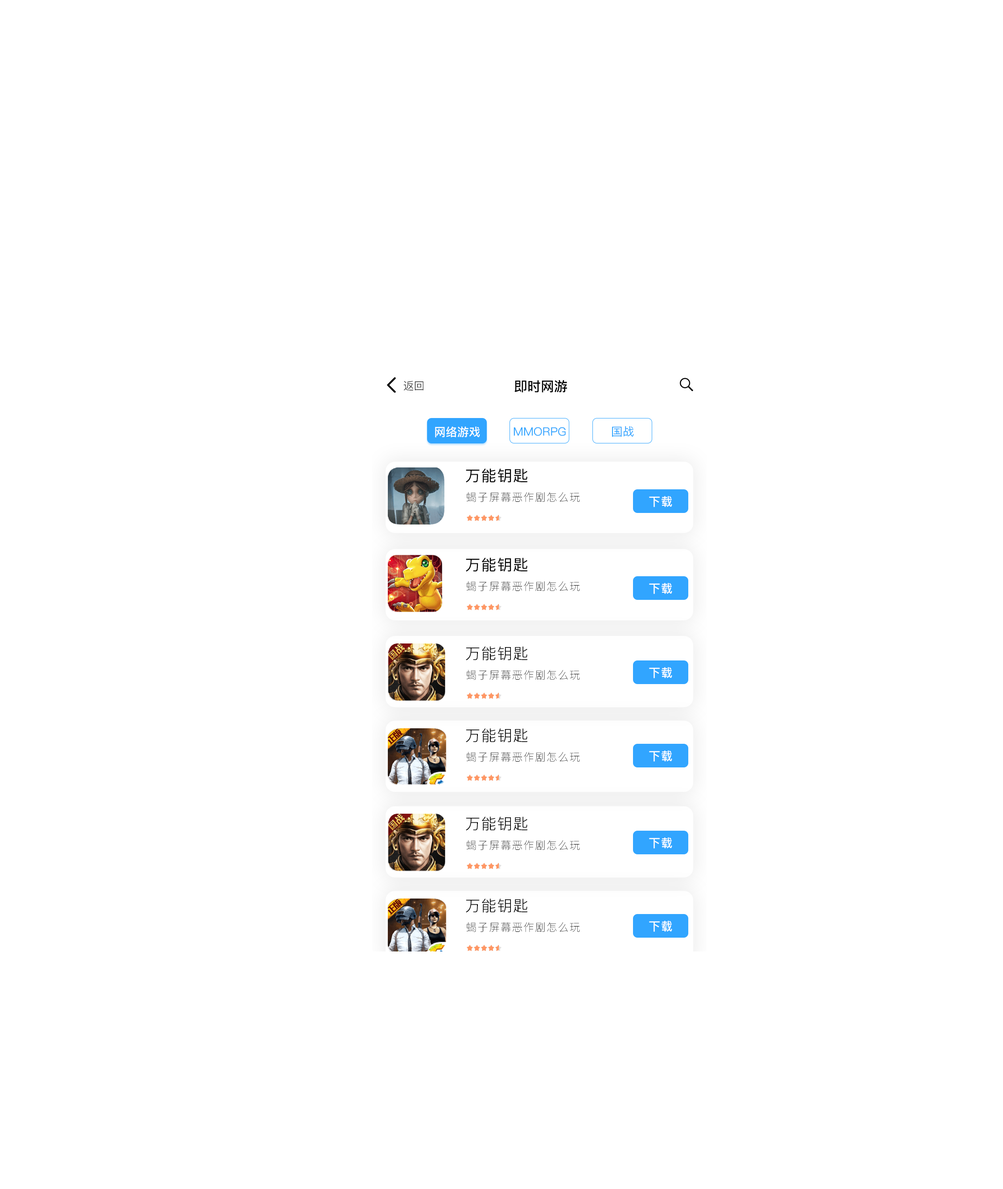
<style>
.page{position:relative;width:1003px;height:1189px;background:#ffffff}
.page>*{position:absolute;margin:0}
.t1{font:10.7px "PingFang-SC-Regular";color:#000000}
.t2{font:13.4px "PingFang-SC-Bold";color:#000000}
.t3{font:11.6px "PingFang-SC-Bold";color:#ffffff}
.t4{font:11.6px "PingFang-SC-Medium";color:#31a5ff;text-transform:uppercase}
.t5{font:11.6px "PingFang-SC-Medium";color:#31a5ff}
.t6{font:15.2px "PingFang-SC-Medium";letter-spacing:0.05em;color:#000000}
.t7{font:10.7px "PingFang-SC-Light";letter-spacing:0.075em;color:#000000}
.t8{font:11.6px "PingFang-SC-Bold";letter-spacing:0.05em;color:#ffffff}
.t9{font:15.2px "PingFang-SC-Regular";letter-spacing:0.05em;color:#000000}
</style>
<div class="page">
<p class="t1" style="left:403px;top:381px;width:20px;height:10px">返回</p>
<p class="t2" style="left:514px;top:380px;width:53px;height:13px">即时网游</p>
<p class="t3" style="left:435px;top:427px;width:45px;height:11px">网络游戏</p>
<p class="t4" style="left:513px;top:427px;width:53px;height:9px">mmorpg</p>
<p class="t5" style="left:612px;top:426px;width:22px;height:11px">国战</p>
<p class="t6" style="left:466px;top:468px;width:62px;height:15px">万能钥匙</p>
<p class="t7" style="left:466px;top:492px;width:114px;height:10px">蝎子屏幕恶作剧怎么玩</p>
<p class="t8" style="left:649px;top:496px;width:23px;height:11px">下载</p>
<p class="t6" style="left:466px;top:558px;width:62px;height:14px">万能钥匙</p>
<p class="t7" style="left:466px;top:581px;width:114px;height:10px">蝎子屏幕恶作剧怎么玩</p>
<p class="t8" style="left:649px;top:583px;width:23px;height:11px">下载</p>
<p class="t9" style="left:466px;top:646px;width:62px;height:15px">万能钥匙</p>
<p class="t7" style="left:466px;top:670px;width:114px;height:10px">蝎子屏幕恶作剧怎么玩</p>
<p class="t8" style="left:649px;top:667px;width:23px;height:11px">下载</p>
<p class="t9" style="left:466px;top:728px;width:62px;height:15px">万能钥匙</p>
<p class="t7" style="left:466px;top:752px;width:114px;height:10px">蝎子屏幕恶作剧怎么玩</p>
<p class="t8" style="left:649px;top:751px;width:23px;height:11px">下载</p>
<p class="t9" style="left:466px;top:817px;width:62px;height:14px">万能钥匙</p>
<p class="t7" style="left:466px;top:840px;width:114px;height:10px">蝎子屏幕恶作剧怎么玩</p>
<p class="t8" style="left:649px;top:837px;width:23px;height:12px">下载</p>
<p class="t9" style="left:466px;top:899px;width:62px;height:14px">万能钥匙</p>
<p class="t7" style="left:466px;top:922px;width:114px;height:10px">蝎子屏幕恶作剧怎么玩</p>
<p class="t8" style="left:649px;top:921px;width:23px;height:11px">下载</p>
</div>
